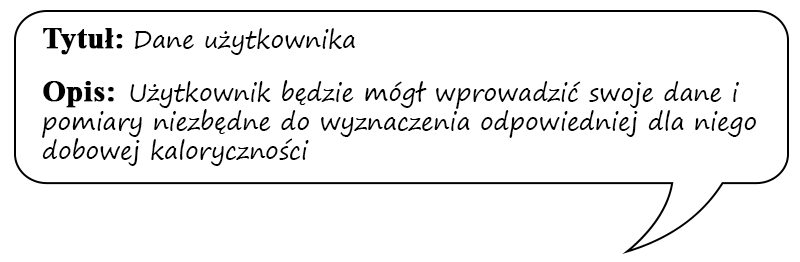
<style>
.page{position:relative;width:800px;height:262px;background:#ffffff}
.page>*{position:absolute;margin:0}
.t1{font:24px "SegoePrint";color:#000000}
.t2{font:30px "TimesNewRomanPS-BoldMT";color:#000000;font-weight:bold}
</style>
<div class="page">
<p class="t1" style="left:42px;top:28px;width:714px;height:138px"><span class="t2">Tytuł: </span>Dane użytkownika<br><br><span class="t2">Opis:  </span>Użytkownik będzie mógł wprowadzić swoje dane i pomiary niezbędne do wyznaczenia odpowiedniej dla niego dobowej kaloryczności</p>
</div>
